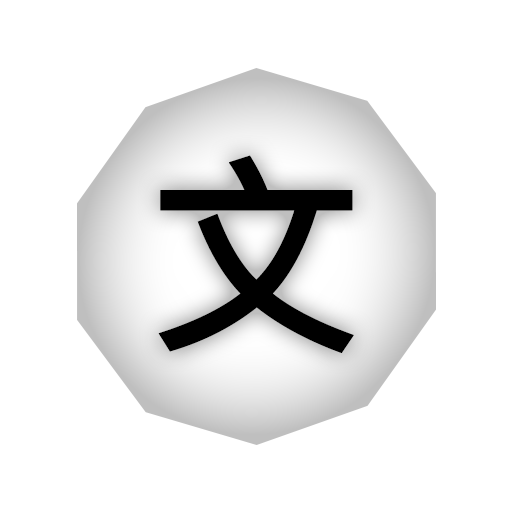
<style>
.page{position:relative;width:512px;height:512px;background:#ffffff}
.page>*{position:absolute;margin:0}
.t1{font:220.6px "MicrosoftJhengHeiBold";color:#000000;font-weight:bold}
</style>
<div class="page">
<p class="t1" style="left:158px;top:155px;width:196px;height:198px">文</p>
</div>
